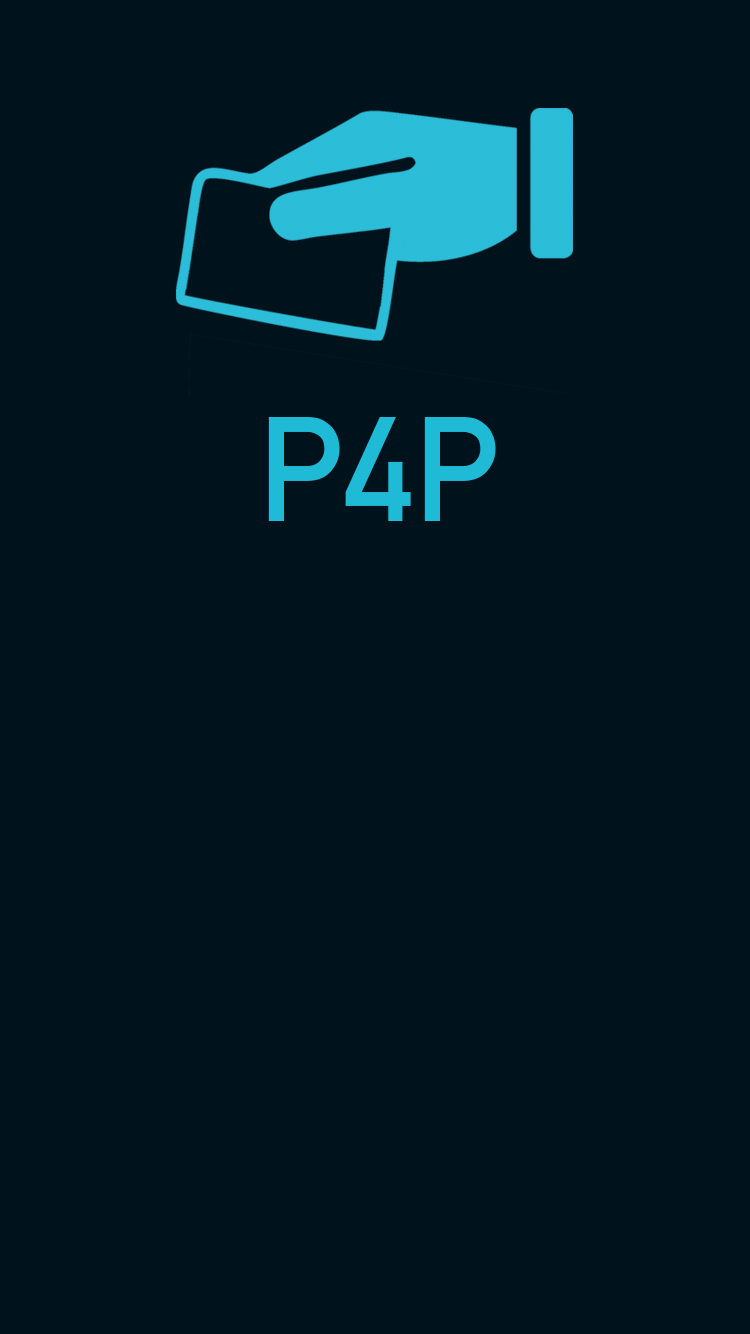
<style>
.page{position:relative;width:750px;height:1334px;background:#00121b}
.page>*{position:absolute;margin:0}
.t1{font:145.8px "DINAlternate-Bold";color:#1fbad6}
</style>
<div class="page">
<p class="t1" style="left:268px;top:417px;width:228px;height:104px">P4P</p>
</div>
